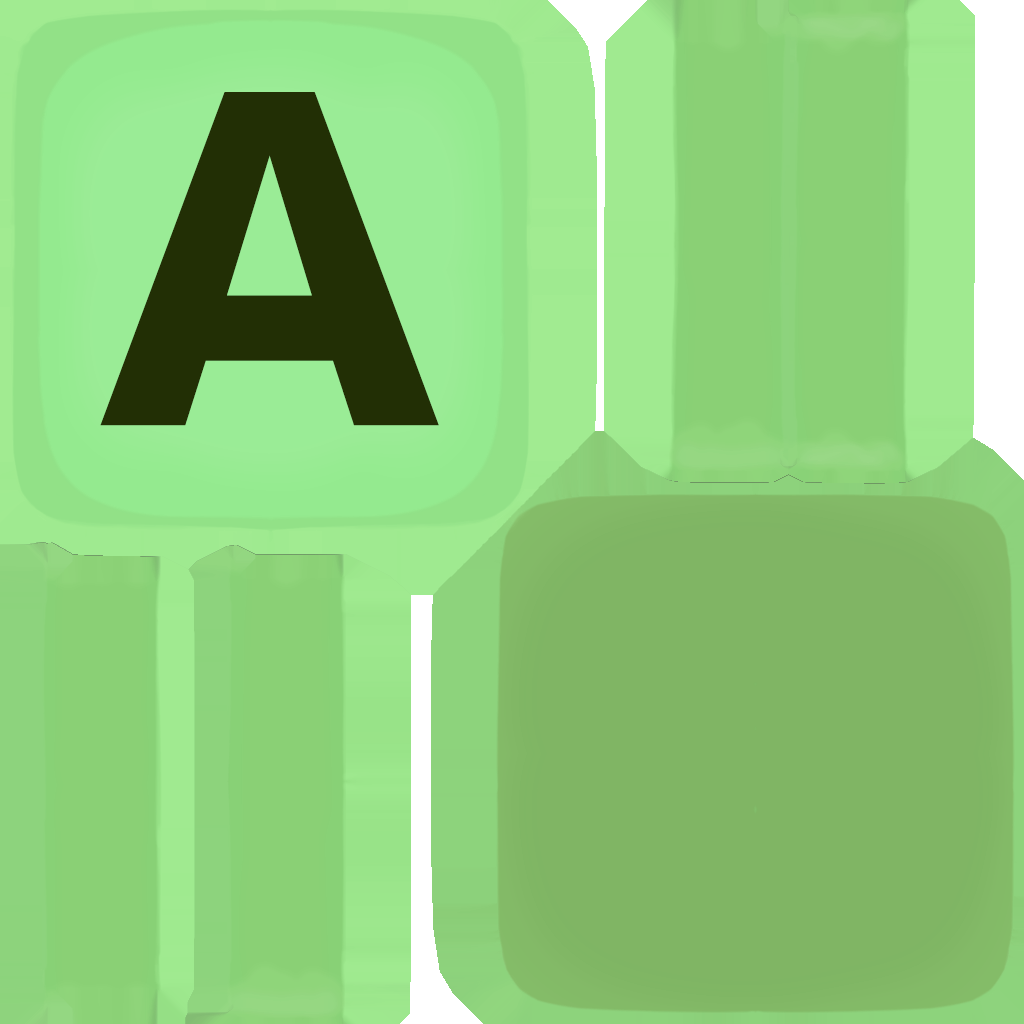
<style>
.page{position:relative;width:1024px;height:1024px}
.page>*{position:absolute;margin:0}
.t1{font:500px "Seravek-Bold";color:#222f05}
</style>
<div class="page">
<p class="t1" style="left:100px;top:92px;width:339px;height:334px">A</p>
</div>
